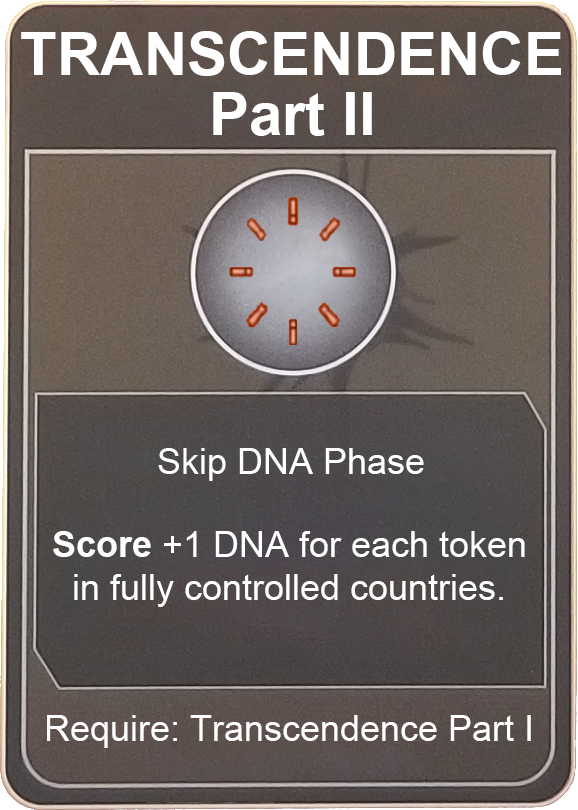
<style>
.page{position:relative;width:578px;height:810px}
.page>*{position:absolute;margin:0}
.t1{font:60px/60px "Arial-BoldMT";color:#ffffff}
.t2{font:36px "ArialMT";color:#ffffff}
.t3{font:36px "Arial-BoldMT";color:#ffffff}
</style>
<div class="page">
<p class="t1" style="left:21px;top:31px;width:540px;height:105px;text-align:center">TRANSCENDENCE<br>Part II</p>
<p class="t2" style="left:158px;top:448px;width:266px;height:33px">Skip DNA Phase</p>
<p class="t2" style="left:53px;top:531px;width:472px;height:76px;text-align:center"><span class="t3"><br>Score </span>+1 DNA for each token in fully controlled countries.</p>
<p class="t2" style="left:47px;top:715px;width:484px;height:33px">Require: Transcendence Part I</p>
</div>
